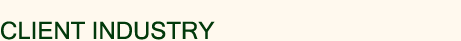
<style>
.page{position:relative;width:461px;height:41px;background:#fff9ee}
.page>*{position:absolute;margin:0}
.t1{font:24px "MicrosoftSansSerif";color:#02390b}
</style>
<div class="page">
<p class="t1" style="left:1px;top:21px;width:214px;height:19px">CLIENT INDUSTRY</p>
</div>
